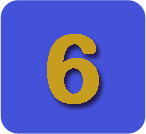
<style>
.page{position:relative;width:146px;height:134px;background:#4452da}
.page>*{position:absolute;margin:0}
.t1{font:94.7px "ArialRoundedMTBold";letter-spacing:-0.01em;color:#c69d1e;font-weight:bold}
</style>
<div class="page">
<p class="t1" style="left:47px;top:34px;width:52px;height:70px">6</p>
</div>
